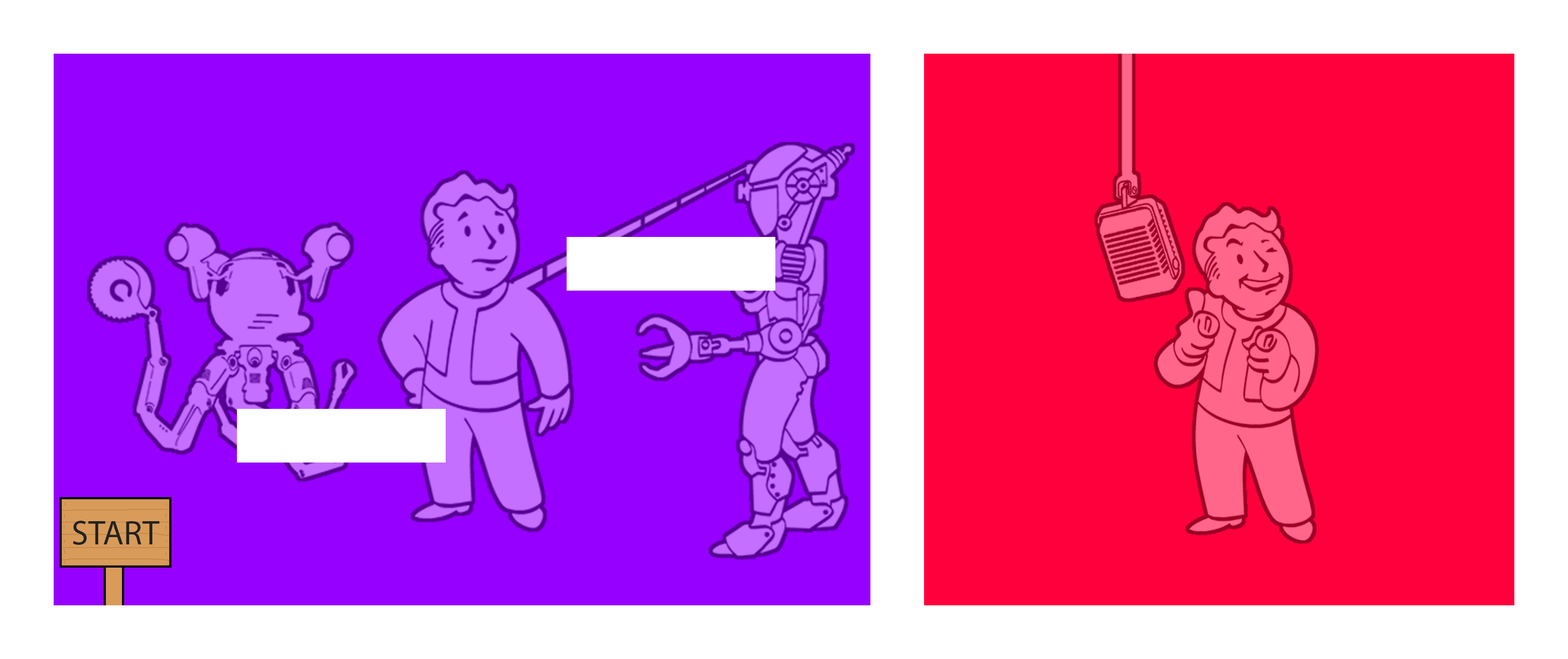
<style>
.page{position:relative;width:1568px;height:659px;background:#9600ff}
.page>*{position:absolute;margin:0}
.t1{font:34.1px "MyriadPro-Regular";color:#222222}
</style>
<div class="page">
<p class="t1" style="left:73px;top:521px;width:87px;height:24px">START</p>
</div>
